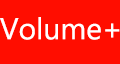
<style>
.page{position:relative;width:120px;height:64px;background:#ff0d00}
.page>*{position:absolute;margin:0}
.t1{font:30px "MicrosoftTaiLe";color:#ffffff}
</style>
<div class="page">
<p class="t1" style="left:0px;top:17px;width:120px;height:23px">Volume+</p>
</div>
